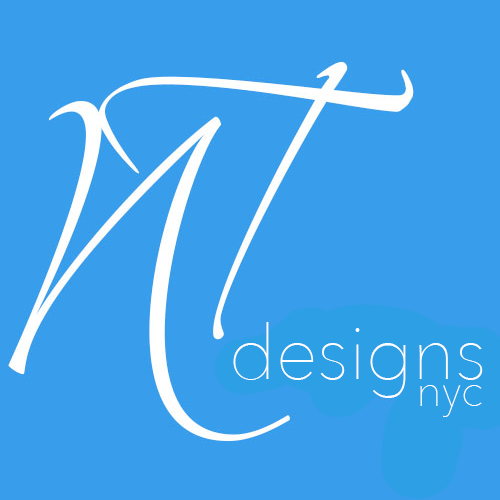
<style>
.page{position:relative;width:500px;height:500px;background:#389deb}
.page>*{position:absolute;margin:0}
.t1{font:75px "AvenirNext-UltraLight";color:#ffffff}
.t2{font:45px "AvenirNext-UltraLight";color:#ffffff}
</style>
<div class="page">
<p class="t1" style="left:233px;top:322px;width:250px;height:76px">designs</p>
<p class="t2" style="left:420px;top:385px;width:62px;height:32px">nyc</p>
</div>
